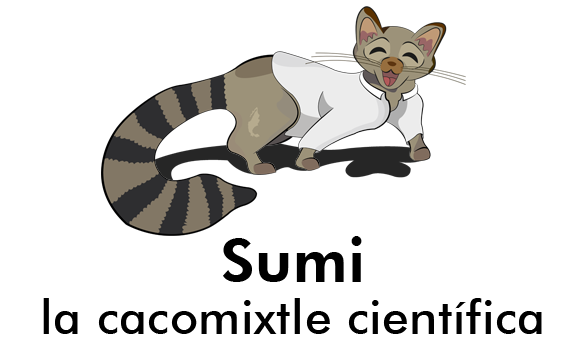
<style>
.page{position:relative;width:567px;height:340px;background:#ffffff}
.page>*{position:absolute;margin:0}
.t1{font:60px "FuturaBT-Heavy";letter-spacing:0.011em;color:#000000}
.t2{font:48px "FuturaBT-Medium";letter-spacing:0.011em;color:#000000}
</style>
<div class="page">
<p class="t1" style="left:223px;top:236px;width:139px;height:46px">Sumi</p>
<p class="t2" style="left:43px;top:298px;width:499px;height:36px">la cacomixtle científica</p>
</div>
